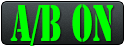
<style>
.page{position:relative;width:125px;height:46px;background:#00ff00}
.page>*{position:absolute;margin:0}
.t1{font:48px "StencilStd";color:#00ff00;scale:0.6 1}
</style>
<div class="page">
<p class="t1" style="left:10px;top:4px;width:103px;height:43px">a/b on</p>
</div>
